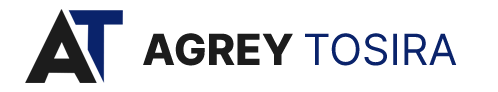
<style>
.page{position:relative;width:498px;height:92px;background:#ffffff}
.page>*{position:absolute;margin:0}
.t1{font:43px "Inter-Regular";color:#0a236b}
.t2{font:43px "Inter-ExtraBold";color:#1c1c1c}
</style>
<div class="page">
<p class="t1" style="left:143px;top:33px;width:314px;height:33px"><span class="t2">AGREY </span>TOSIRA</p>
</div>
